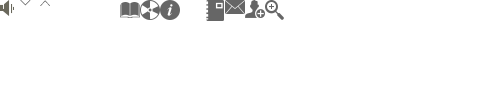
<style>
.page{position:relative;width:500px;height:100px;background:#ffffff}
.page>*{position:absolute;margin:0}
.t1{font:14px "YouYuan";letter-spacing:0.05em;color:#666666}
.t2{font:13.8px "YouYuan";letter-spacing:0.05em;scale:1.05 1}
</style>
<div class="page">
<p class="t1" style="left:20px;top:0px;width:11px;height:6px;rotate:90deg">&gt;</p>
<p class="t2" style="left:40px;top:0px;width:10px;height:6px;rotate:-90deg">&gt;</p>
</div>
